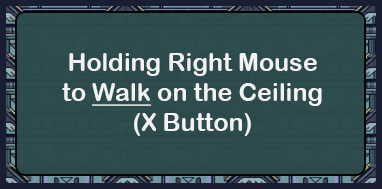
<style>
.page{position:relative;width:382px;height:189px}
.page>*{position:absolute;margin:0}
.t1{font:25px "ArialRoundedMTBold";color:#f3f3f4}
.t2{font:25px "ArialRoundedMTBold";color:#f3f3f4;text-decoration:underline}
</style>
<div class="page">
<p class="t1" style="left:62px;top:53px;width:260px;height:83px;text-align:center">Holding Right Mouse<br>to <span class="t2">Walk</span> on the Ceiling<br>(X Button)</p>
</div>
